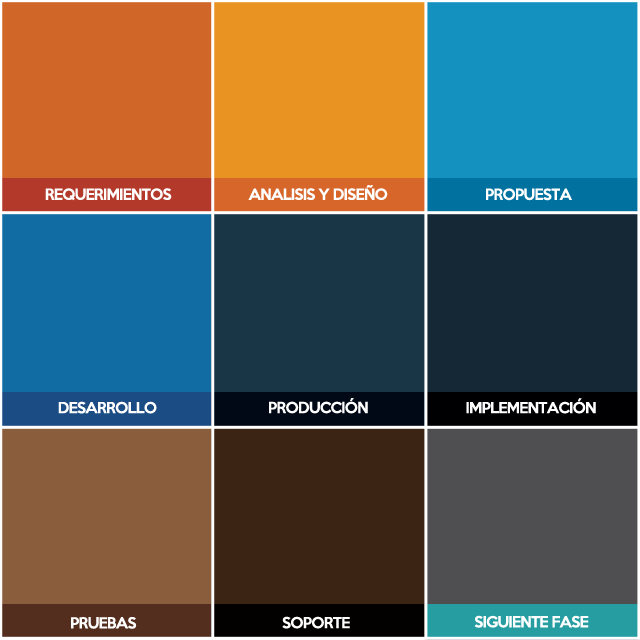
<style>
.page{position:relative;width:640px;height:640px}
.page>*{position:absolute;margin:0}
.t1{font:14px "KeepCalm-Medium";letter-spacing:-0.05em;color:#ffffff}
</style>
<div class="page">
<p class="t1" style="left:248px;top:185px;width:140px;height:15px">ANALISIS Y DISEÑO</p>
<p class="t1" style="left:45px;top:188px;width:127px;height:13px">REQUERIMIENTOS</p>
<p class="t1" style="left:486px;top:188px;width:86px;height:13px">PROPUESTA</p>
<p class="t1" style="left:58px;top:401px;width:99px;height:13px">DESARROLLO</p>
<p class="t1" style="left:269px;top:398px;width:99px;height:16px">PRODUCCIÓN</p>
<p class="t1" style="left:466px;top:398px;width:130px;height:16px">IMPLEMENTACIÓN</p>
<p class="t1" style="left:71px;top:617px;width:66px;height:12px">PRUEBAS</p>
<p class="t1" style="left:282px;top:616px;width:68px;height:13px">SOPORTE</p>
<p class="t1" style="left:474px;top:615px;width:115px;height:13px">SIGUIENTE FASE</p>
</div>
